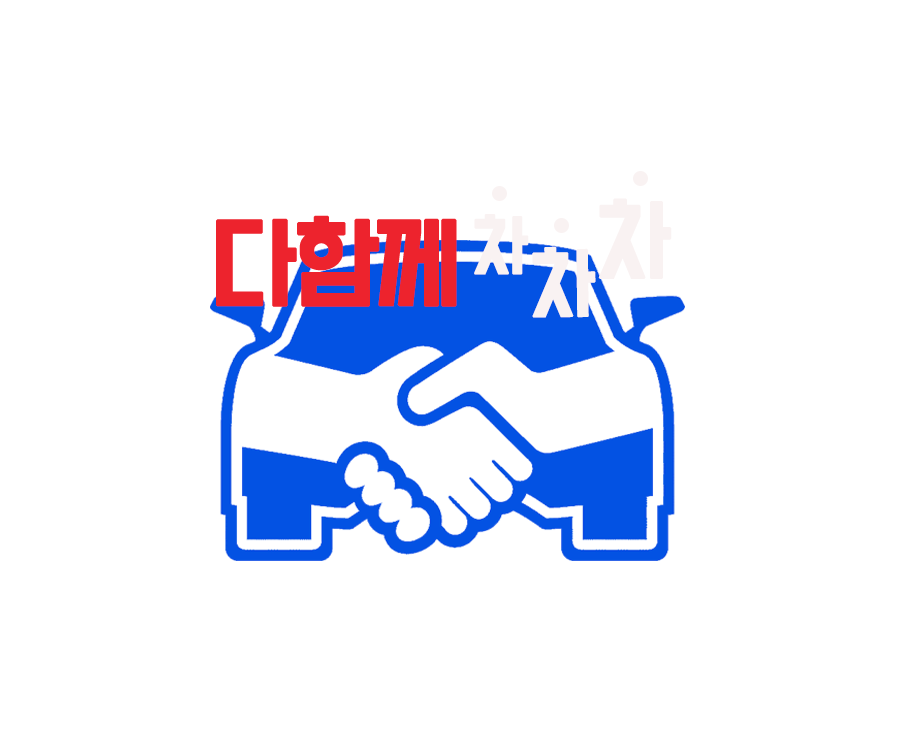
<style>
.page{position:relative;width:900px;height:747px;background:#ffffff}
.page>*{position:absolute;margin:0}
.t1{font:79.8px "BMDoHyeon";letter-spacing:-0.075em;color:#f9f2f2;font-weight:bold}
.t2{font:90px "BMDoHyeon";letter-spacing:-0.075em;color:#ed232d;font-weight:bold}
.t3{font:59.9px "BMDoHyeon";letter-spacing:-0.075em;color:#f9f2f2;font-weight:bold}
.t4{font:69.8px "BMDoHyeon";letter-spacing:-0.075em;color:#f9f2f2;font-weight:bold}
</style>
<div class="page">
<p class="t1" style="left:598px;top:198px;width:74px;height:81px">차</p>
<p class="t2" style="left:216px;top:215px;width:241px;height:92px">다함께</p>
<p class="t3" style="left:474px;top:214px;width:55px;height:61px">차</p>
<p class="t4" style="left:532px;top:246px;width:64px;height:72px;rotate:-1deg">차</p>
</div>
